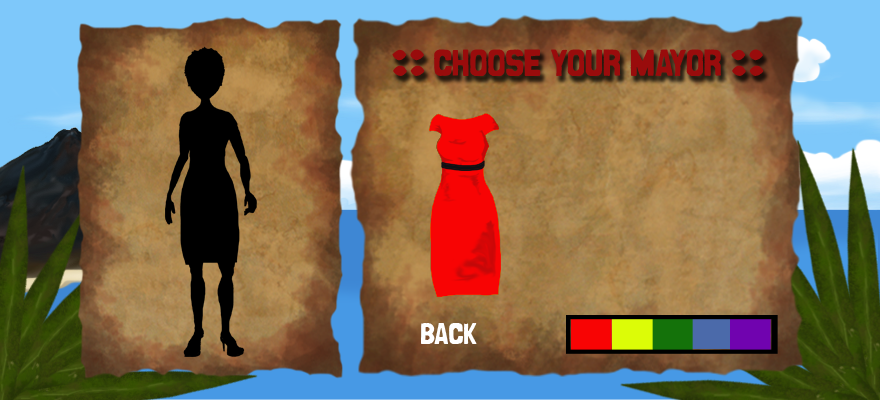
<style>
.page{position:relative;width:880px;height:400px}
.page>*{position:absolute;margin:0}
.t1{font:33px "CanCandeBois";color:#990c0c}
.t2{font:26px "CanCandeBois";color:#ffffff}
</style>
<div class="page">
<p class="t1" style="left:392px;top:49px;width:372px;height:27px">C  choose  your  mayor  C</p>
<p class="t2" style="left:421px;top:323px;width:56px;height:21px">back</p>
</div>
